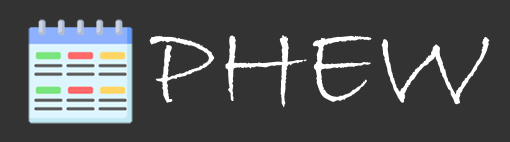
<style>
.page{position:relative;width:510px;height:142px;background:#333333}
.page>*{position:absolute;margin:0}
.t1{font:120px "BradleyHandITC";color:#ffffff}
</style>
<div class="page">
<p class="t1" style="left:149px;top:35px;width:341px;height:73px">PHEW</p>
</div>
